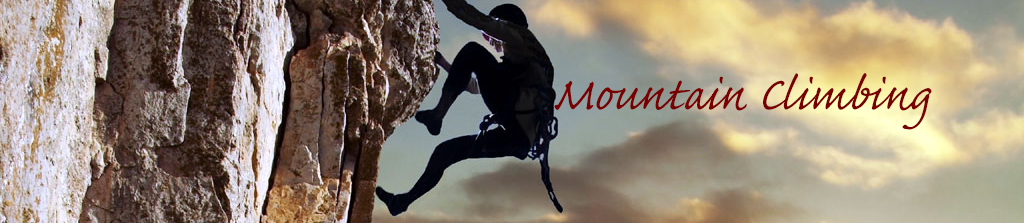
<style>
.page{position:relative;width:1024px;height:223px}
.page>*{position:absolute;margin:0}
.t1{font:60px "CaflischScriptPro-Regular";color:#790000}
</style>
<div class="page">
<p class="t1" style="left:554px;top:73px;width:378px;height:57px">Mountain Climbing</p>
</div>
